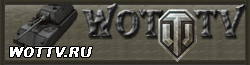
<style>
.page{position:relative;width:250px;height:65px}
.page>*{position:absolute;margin:0}
.t1{font:14px "ArialRoundedMTBold";color:#ffffff;font-weight:bold;font-style:italic}
</style>
<div class="page">
<p class="t1" style="left:10px;top:47px;width:82px;height:10px">WOTTV.RU</p>
</div>
